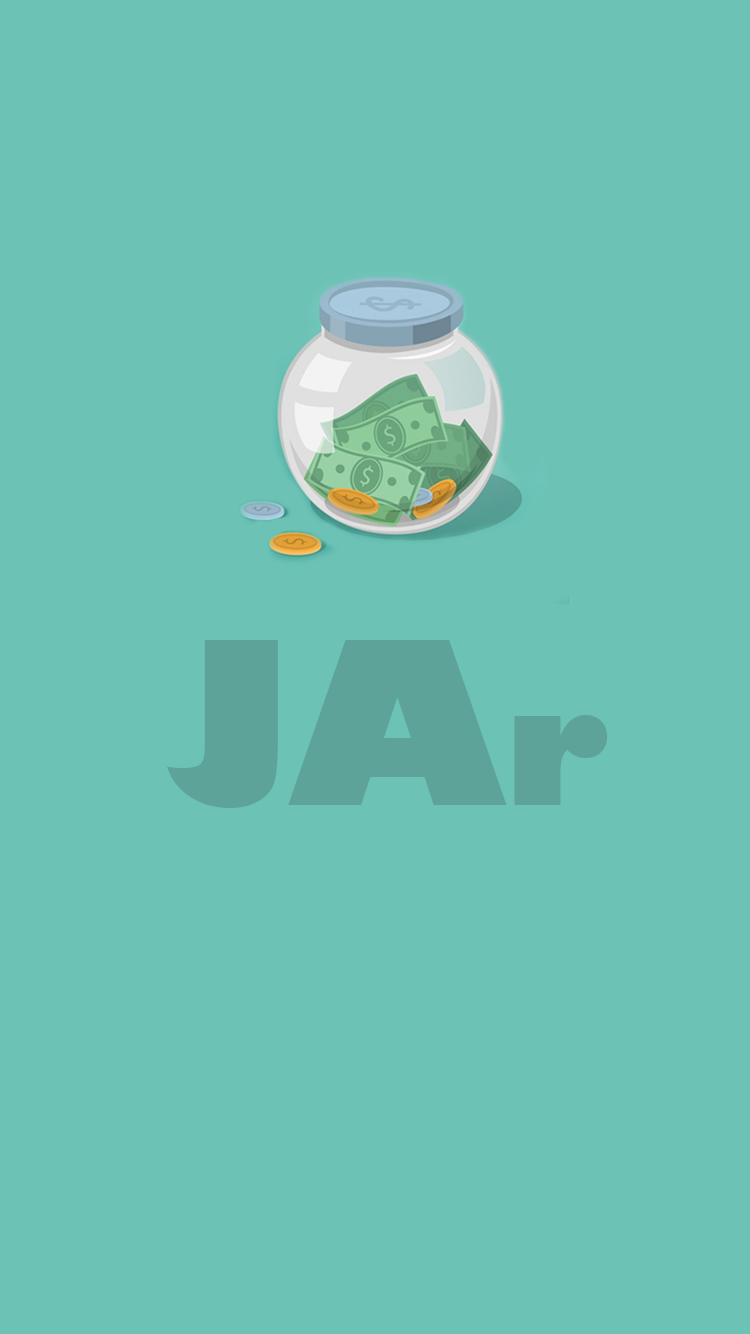
<style>
.page{position:relative;width:750px;height:1334px;background:#6dc2b6}
.page>*{position:absolute;margin:0}
.t1{font:221px "GillSans-UltraBold";color:#5da399}
.t2{font:152px "GillSans-UltraBold";color:#5da399}
</style>
<div class="page">
<p class="t1" style="left:167px;top:640px;width:441px;height:168px">JA<span class="t2">r</span></p>
</div>
